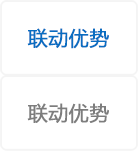
<style>
.page{position:relative;width:138px;height:151px;background:#ffffff}
.page>*{position:absolute;margin:0}
.t1{font:20px "MicrosoftYaHei";color:#096dc1;font-weight:bold}
.t2{font:20px "MicrosoftYaHei";color:#7d7d7d;font-weight:bold}
</style>
<div class="page">
<p class="t1" style="left:27px;top:28px;width:82px;height:21px">联动优势</p>
<p class="t2" style="left:27px;top:103px;width:82px;height:21px">联动优势</p>
</div>
